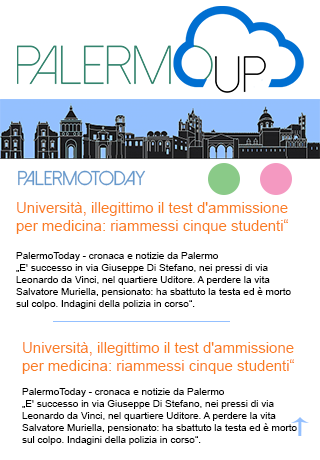
<style>
.page{position:relative;width:320px;height:460px;background:#ffffff}
.page>*{position:absolute;margin:0}
.t1{font:20px "DolceVita";color:#6699cc}
.t2{font:15px "ArialMT";color:#fa7d20}
.t3{font:10px "ArialMT";color:#000000}
</style>
<div class="page">
<p class="t1" style="left:18px;top:170px;width:128px;height:16px">PalermoToday</p>
<p class="t2" style="left:16px;top:202px;width:272px;height:32px">Università, illegittimo il test d'ammissione<br>per medicina: riammessi cinque studenti“</p>
<p class="t3" style="left:16px;top:252px;width:275px;height:57px">PalermoToday - cronaca e notizie da Palermo<br>„E' successo in via Giuseppe Di Stefano, nei pressi di via Leonardo da Vinci, nel quartiere Uditore. A perdere la vita Salvatore Muriella, pensionato: ha sbattuto la testa ed è morto sul colpo. Indagini della polizia in corso“.</p>
<p class="t2" style="left:22px;top:342px;width:272px;height:32px">Università, illegittimo il test d'ammissione<br>per medicina: riammessi cinque studenti“</p>
<p class="t3" style="left:22px;top:388px;width:275px;height:57px">PalermoToday - cronaca e notizie da Palermo<br>„E' successo in via Giuseppe Di Stefano, nei pressi di via Leonardo da Vinci, nel quartiere Uditore. A perdere la vita Salvatore Muriella, pensionato: ha sbattuto la testa ed è morto sul colpo. Indagini della polizia in corso“.</p>
</div>
